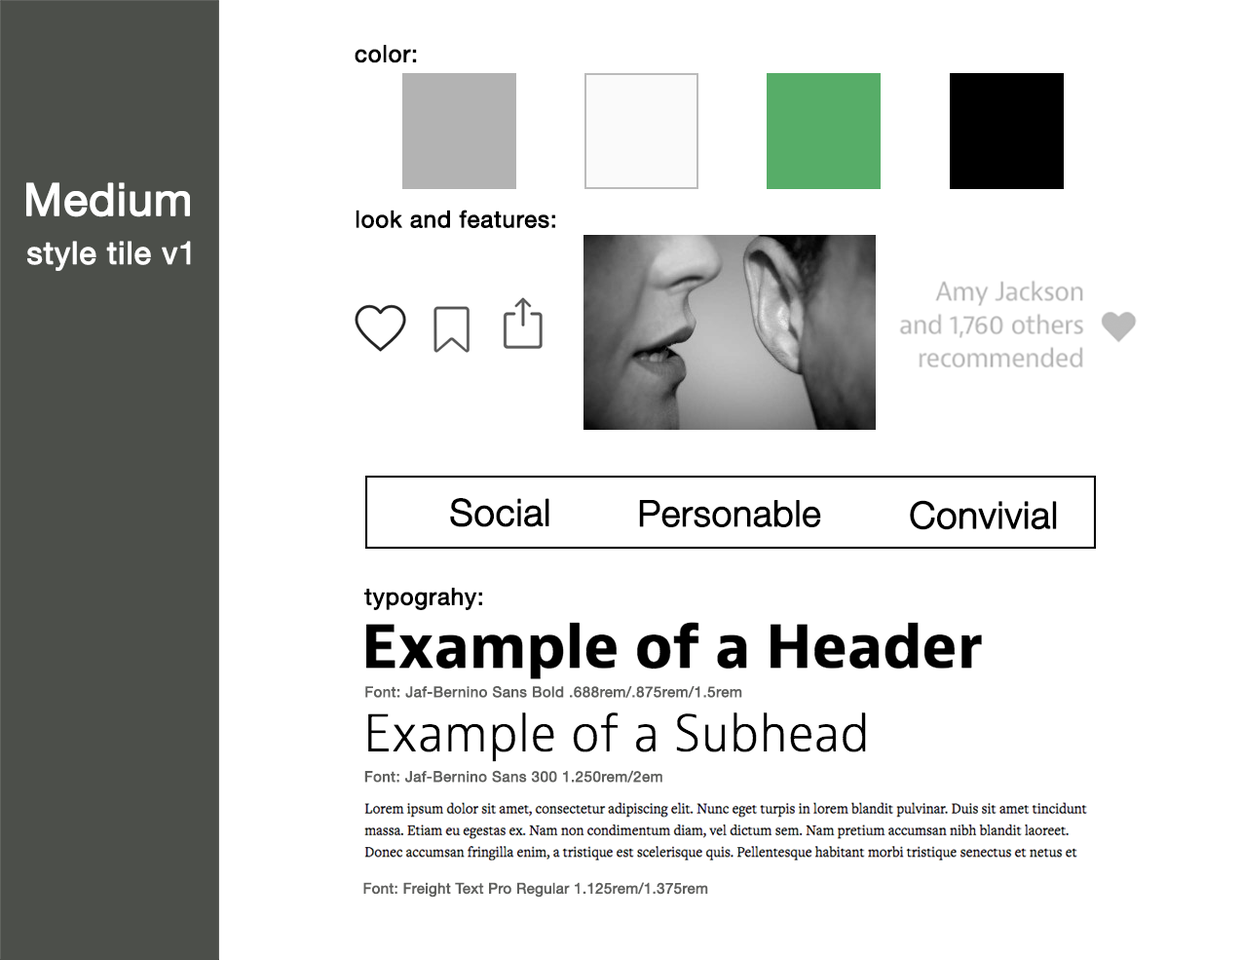
<style>
.page{position:relative;width:1242px;height:960px;background:#ffffff}
.page>*{position:absolute;margin:0}
.t1{font:23.4px "HelveticaNeue";letter-spacing:0.01em;color:#000000;font-weight:bold}
.t2{font:44.8px "HelveticaNeue";color:#ffffff;font-weight:bold}
.t3{font:46.8px "HelveticaNeue";color:#ffffff;font-weight:bold}
.t4{font:31.2px "HelveticaNeue";letter-spacing:0.01em;color:#ffffff;font-weight:bold}
.t5{font:37px "HelveticaNeue-Light";color:#000000;font-weight:bold}
.t6{font:36.1px "HelveticaNeue-Light";color:#000000;font-weight:bold}
.t7{font:14.6px "HelveticaNeue";letter-spacing:0.01em;color:#5f605e;font-weight:bold}
.t8{font:14.6px "HelveticaNeue";color:#5f605e;font-weight:bold}
</style>
<div class="page">
<p class="t1" style="left:355px;top:45px;width:62px;height:18px">color:</p>
<p class="t2" style="left:26px;top:182px;width:164px;height:35px"><span class="t3"><br></span>Medium</p>
<p class="t1" style="left:356px;top:209px;width:199px;height:19px">look and features:</p>
<p class="t4" style="left:27px;top:241px;width:164px;height:30px">style tile v1</p>
<p class="t5" style="left:450px;top:498px;width:100px;height:29px">Social</p>
<p class="t6" style="left:639px;top:500px;width:182px;height:27px">Personable</p>
<p class="t5" style="left:910px;top:500px;width:147px;height:30px">Convivial</p>
<p class="t1" style="left:364px;top:588px;width:118px;height:22px">typograhy:</p>
<p class="t7" style="left:365px;top:686px;width:378px;height:12px">Font: Jaf-Bernino Sans Bold .688rem/.875rem/1.5rem</p>
<p class="t7" style="left:364px;top:770px;width:299px;height:12px">Font: Jaf-Bernino Sans 300 1.250rem/2em</p>
<p class="t8" style="left:363px;top:882px;width:345px;height:15px">Font: Freight Text Pro Regular 1.125rem/1.375rem</p>
</div>
